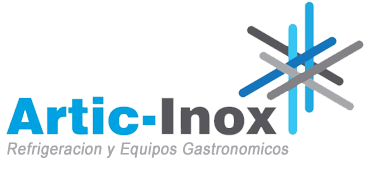
<style>
.page{position:relative;width:369px;height:170px;background:#ffffff}
.page>*{position:absolute;margin:0}
.t1{font:16.2px "ArialMT";letter-spacing:0.025em;color:#a7a8ac;font-weight:bold;font-style:italic;scale:0.89 1}
</style>
<div class="page">
<p class="t1" style="left:7px;top:142px;width:282px;height:16px">Refrigeracion y Equipos Gastronomicos</p>
</div>
